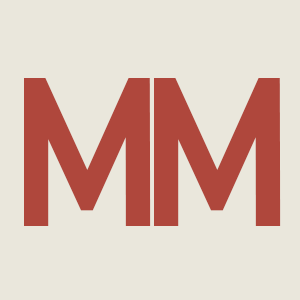
<style>
.page{position:relative;width:300px;height:300px;background:#eae7dc}
.page>*{position:absolute;margin:0}
.t1{font:212.1px "Montserrat-Bold";letter-spacing:-0.14em;color:#af473c;scale:0.75 1}
</style>
<div class="page">
<p class="t1" style="left:24px;top:78px;width:257px;height:148px">MM</p>
</div>
